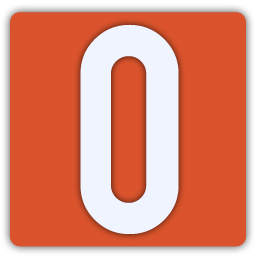
<style>
.page{position:relative;width:256px;height:256px;background:#da532c}
.page>*{position:absolute;margin:0}
.t1{font:230px "Bebas";color:#eff4ff}
</style>
<div class="page">
<p class="t1" style="left:80px;top:24px;width:99px;height:210px">o</p>
</div>
